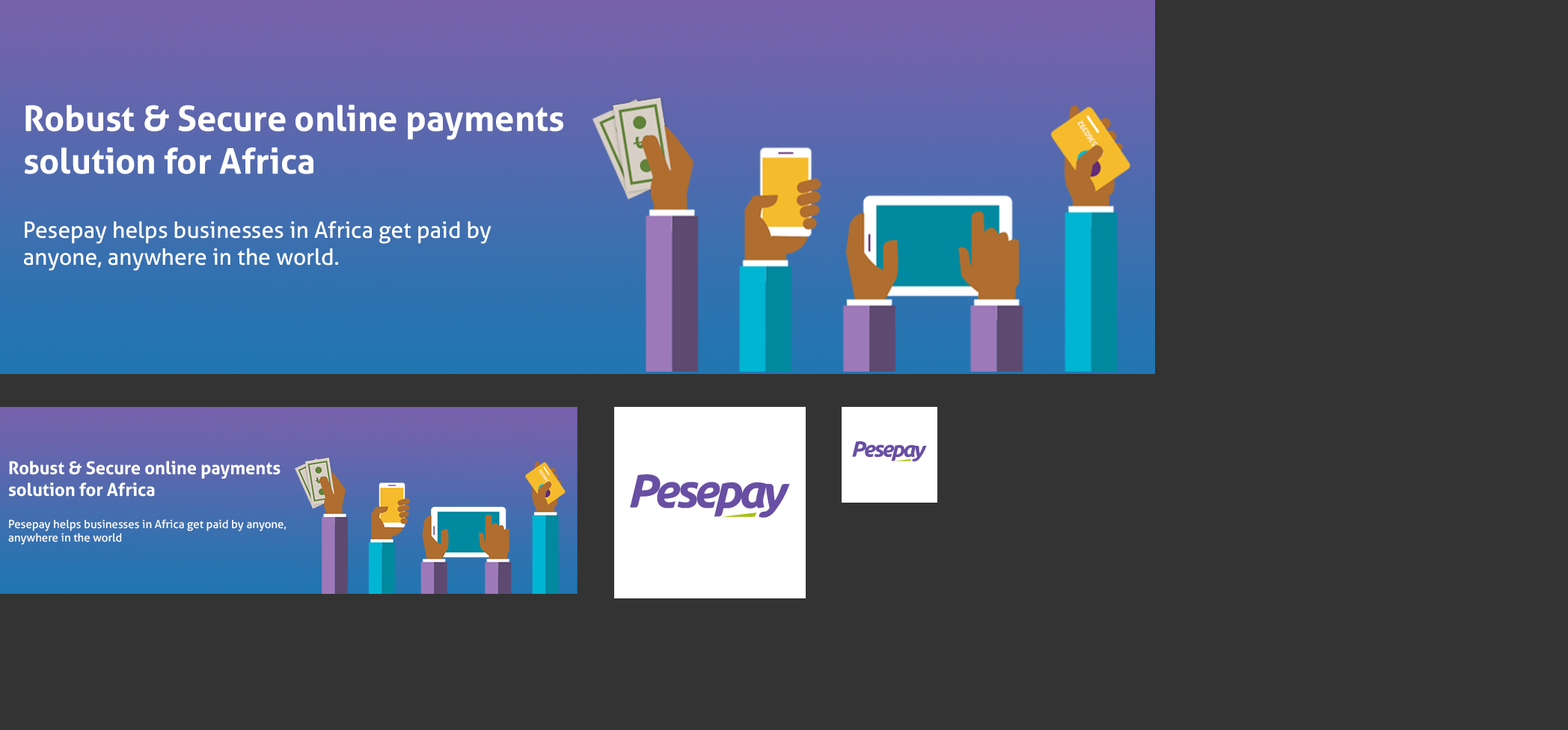
<style>
.page{position:relative;width:1568px;height:730px;background:#333333}
.page>*{position:absolute;margin:0}
.t1{font:35.2px "Aller-Bold";color:#ffffff}
.t2{font:22.4px "Aller";color:#ffffff}
.t3{font:17.7px "Aller-Bold";color:#ffffff}
.t4{font:11.3px "Aller";color:#ffffff}
</style>
<div class="page">
<p class="t1" style="left:25px;top:105px;width:538px;height:69px">Robust &amp; Secure online payments <br>solution for Africa</p>
<p class="t2" style="left:24px;top:221px;width:467px;height:50px">Pesepay helps businesses in Africa get paid by anyone, anywhere in the world.</p>
<p class="t3" style="left:9px;top:461px;width:272px;height:36px">Robust &amp; Secure online payments <br>solution for Africa</p>
<p class="t4" style="left:8px;top:519px;width:279px;height:26px">Pesepay helps businesses in Africa get paid by anyone, anywhere in the world</p>
</div>
